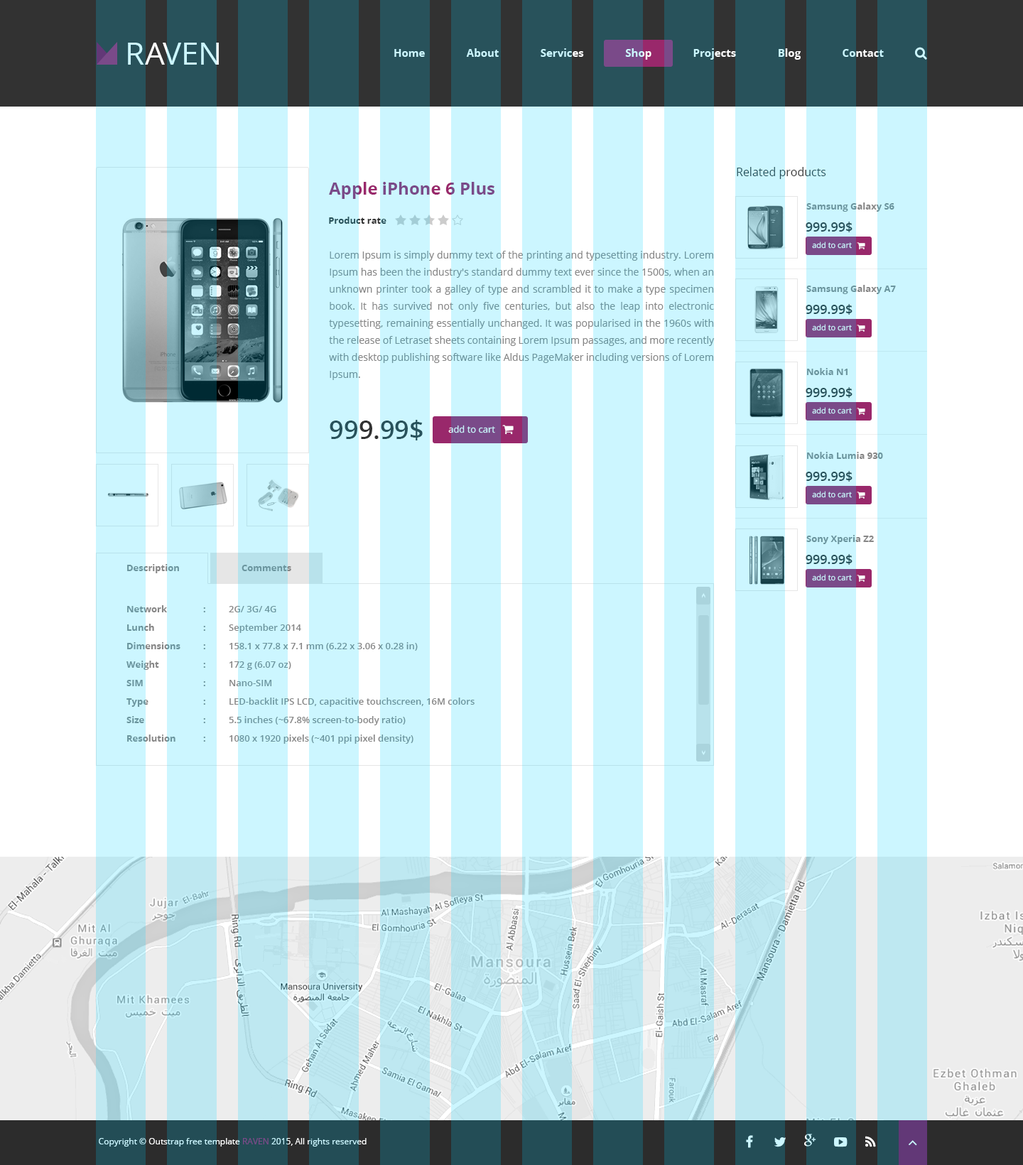
<style>
.page{position:relative;width:1023px;height:1165px;background:#ccf6ff}
.page>*{position:absolute;margin:0}
.t1{font:31.3px "OpenSans";color:#ccf6ff}
.t2{font:10.7px "OpenSans-Bold"}
.t3{font:11.4px "OpenSans";color:#28525b}
.t4{font:17.1px "OpenSans-Bold";color:#7a4a89}
.t5{font:9.2px "OpenSans-Bold";color:#6b959e}
.t6{font:9.2px "OpenSans-Bold"}
.t7{font:12.8px "OpenSans-Semibold";color:#28525b}
.t8{font:7.8px "OpenSans";color:#ccf6ff}
.t9{font:9.9px/17.1px "OpenSans";color:#6b959e}
.t10{font:25.6px "OpenSans-Semibold";color:#28525b}
.t11{font:9.2px "OpenSans";color:#ccf6ff}
.t12{font:9.2px/18.5px "OpenSans-Semibold"}
.t13{font:9.2px/18.5px "OpenSans-Bold"}
.t14{font:8.5px "OpenSans"}
</style>
<div class="page">
<p class="t1" style="left:128px;top:43px;width:91px;height:22px">RAVEN</p>
<p class="t2" style="left:394px;top:48px;width:490px;height:12px">Home               About               Services               Shop               Projects               Blog               Contact</p>
<p class="t3" style="left:737px;top:167px;width:89px;height:12px">Related products</p>
<p class="t4" style="left:329px;top:182px;width:166px;height:17px">Apple iPhone 6 Plus</p>
<p class="t5" style="left:807px;top:203px;width:88px;height:9px">Samsung Galaxy S6</p>
<p class="t6" style="left:329px;top:217px;width:58px;height:7px">Product rate</p>
<p class="t7" style="left:806px;top:222px;width:47px;height:10px">999.99$</p>
<p class="t8" style="left:812px;top:242px;width:40px;height:7px">add to cart</p>
<p class="t9" style="left:329px;top:251px;width:386px;height:129px;text-align:justify">Lorem Ipsum is simply dummy text of the printing and typesetting industry. Lorem Ipsum has been the industry's standard dummy text ever since the 1500s, when an unknown printer took a galley of type and scrambled it to make a type specimen book. It has survived not only five centuries, but also the leap into electronic typesetting, remaining essentially unchanged. It was popularised in the 1960s with the release of Letraset sheets containing Lorem Ipsum passages, and more recently with desktop publishing software like Aldus PageMaker including versions of Lorem Ipsum.</p>
<p class="t5" style="left:807px;top:285px;width:89px;height:9px">Samsung Galaxy A7</p>
<p class="t7" style="left:806px;top:304px;width:47px;height:11px">999.99$</p>
<p class="t8" style="left:812px;top:324px;width:40px;height:7px">add to cart</p>
<p class="t5" style="left:807px;top:368px;width:41px;height:7px">Nokia N1</p>
<p class="t7" style="left:806px;top:387px;width:47px;height:11px">999.99$</p>
<p class="t8" style="left:812px;top:407px;width:40px;height:7px">add to cart</p>
<p class="t10" style="left:330px;top:420px;width:93px;height:21px">999.99$</p>
<p class="t11" style="left:448px;top:425px;width:47px;height:8px">add to cart</p>
<p class="t6" style="left:807px;top:452px;width:76px;height:7px">Nokia Lumia 930</p>
<p class="t7" style="left:806px;top:471px;width:47px;height:11px">999.99$</p>
<p class="t8" style="left:812px;top:491px;width:40px;height:7px">add to cart</p>
<p class="t5" style="left:807px;top:535px;width:67px;height:9px">Sony Xperia Z2</p>
<p class="t7" style="left:806px;top:554px;width:47px;height:11px">999.99$</p>
<p class="t6" style="left:127px;top:564px;width:52px;height:9px">Description</p>
<p class="t5" style="left:242px;top:565px;width:49px;height:6px">Comments</p>
<p class="t8" style="left:812px;top:574px;width:40px;height:7px">add to cart</p>
<p class="t12" style="left:126px;top:605px;width:349px;height:139px"><span class="t13">Network  : </span>2G/ 3G/ 4G<br><span class="t13">Lunch  : </span>September 2014<br><span class="t13">Dimensions : </span>158.1 x 77.8 x 7.1 mm (6.22 x 3.06 x 0.28 in)<br><span class="t13">Weight  : </span>172 g (6.07 oz)<br><span class="t13">SIM   : </span>Nano-SIM<br><span class="t13">Type   : </span>LED-backlit IPS LCD, capacitive touchscreen, 16M colors<br><span class="t13">Size   : </span>5.5 inches (~67.8% screen-to-body ratio)<br><span class="t13">Resolution  : </span>1080 x 1920 pixels (~401 ppi pixel density)</p>
<p class="t14" style="left:99px;top:1138px;width:268px;height:9px">Copyright © Outstrap free template RAVEN 2015, All rights reserved</p>
</div>
